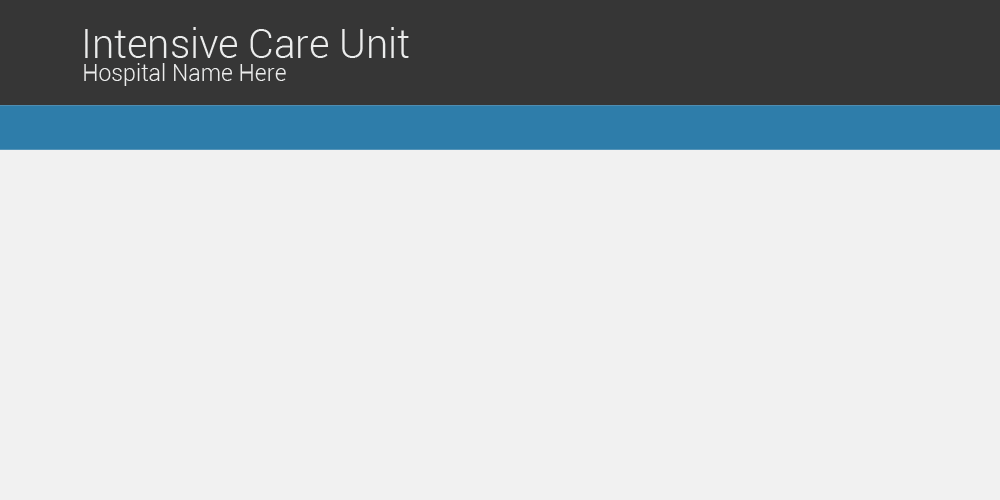
<style>
.page{position:relative;width:1000px;height:500px;background:#f1f1f1}
.page>*{position:absolute;margin:0}
.t1{font:39.8px "Roboto-Light";color:#ebecec}
.t2{font:23.1px "Roboto-Light";color:#ebecec}
</style>
<div class="page">
<p class="t1" style="left:85px;top:27px;width:324px;height:31px">Intensive Care Unit</p>
<p class="t2" style="left:84px;top:63px;width:202px;height:23px">Hospital Name Here</p>
</div>
